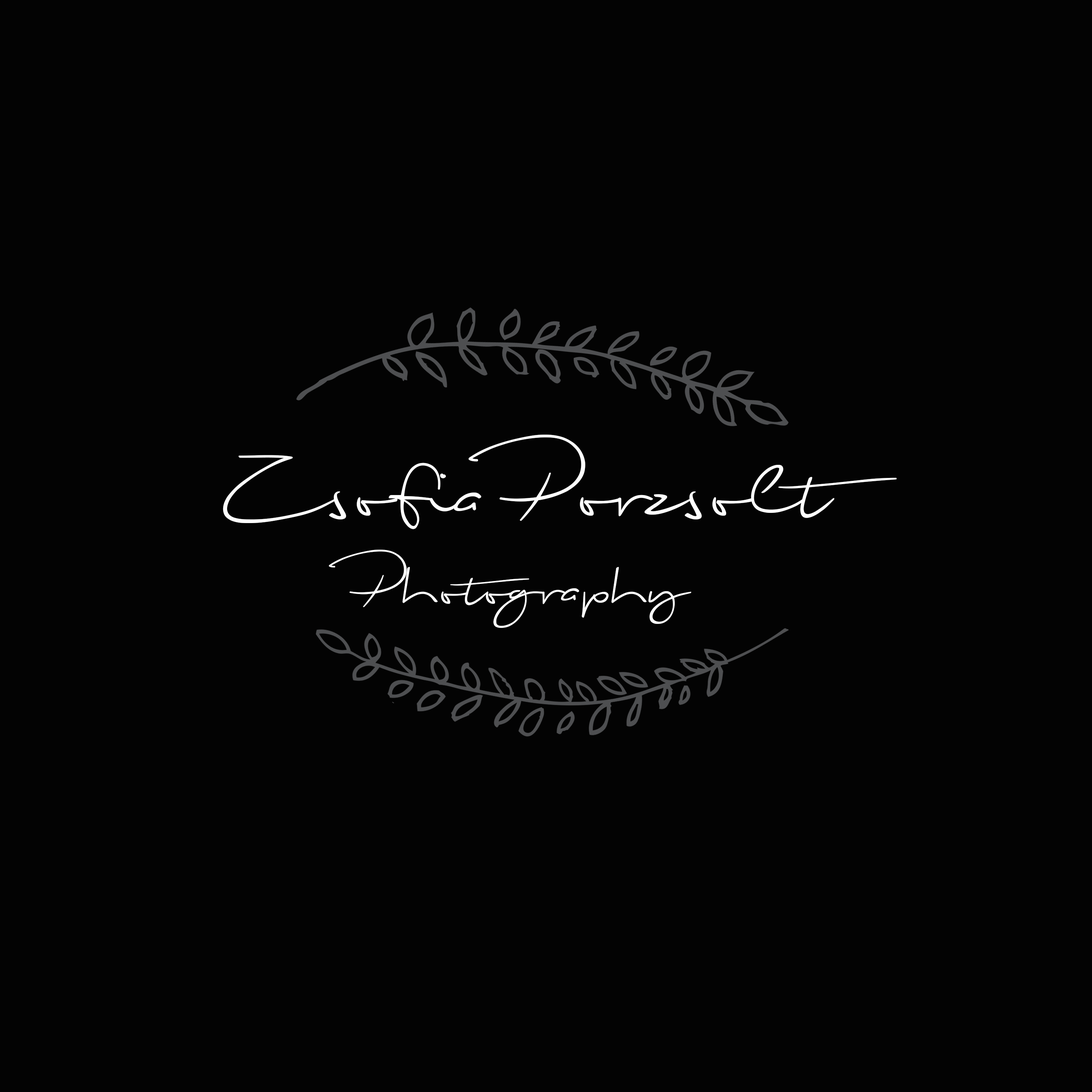
<style>
.page{position:relative;width:1092px;height:1092px;background:#030303}
.page>*{position:absolute;margin:0}
.t1{font:109.2px "BiloxiScript";color:#fefefe}
.t2{font:72.8px "BiloxiScript";color:#fefefe}
</style>
<div class="page">
<p class="t1" style="left:223px;top:435px;width:674px;height:193px;text-align:center">Zsofia Porzsolt<br><span class="t2">Photography</span></p>
</div>
